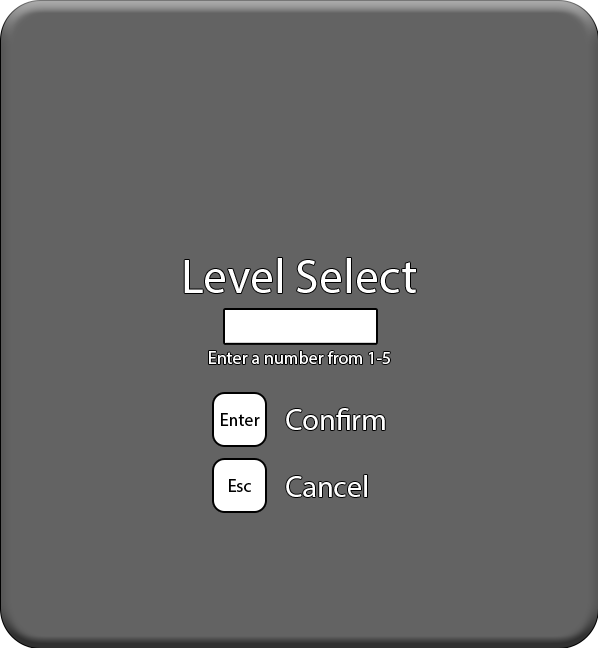
<style>
.page{position:relative;width:598px;height:648px;background:#636363}
.page>*{position:absolute;margin:0}
.t1{font:18px "MyriadPro-Regular";color:#ffffff}
.t2{font:18px "MyriadPro-Regular";color:#000000}
.t3{font:30px "MyriadPro-Regular";color:#ffffff}
</style>
<div class="page">
<p class="t1" style="left:209px;top:351px;width:181px;height:13px">Enter a number from 1-5</p>
<p class="t2" style="left:221px;top:413px;width:39px;height:13px">Enter</p>
<p class="t3" style="left:286px;top:408px;width:99px;height:22px">Confirm</p>
<p class="t2" style="left:229px;top:479px;width:22px;height:13px">Esc</p>
<p class="t3" style="left:286px;top:475px;width:81px;height:22px">Cancel</p>
</div>
